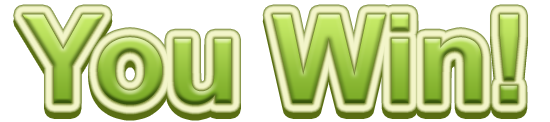
<style>
.page{position:relative;width:550px;height:122px;background:#ffffff}
.page>*{position:absolute;margin:0}
.t1{font:123.2px "Arial-BoldMT";scale:0.97 1}
</style>
<div class="page">
<p class="t1" style="left:23px;top:14px;width:495px;height:91px">You Win!</p>
<p class="t1" style="left:23px;top:20px;width:495px;height:91px">You Win!</p>
</div>
